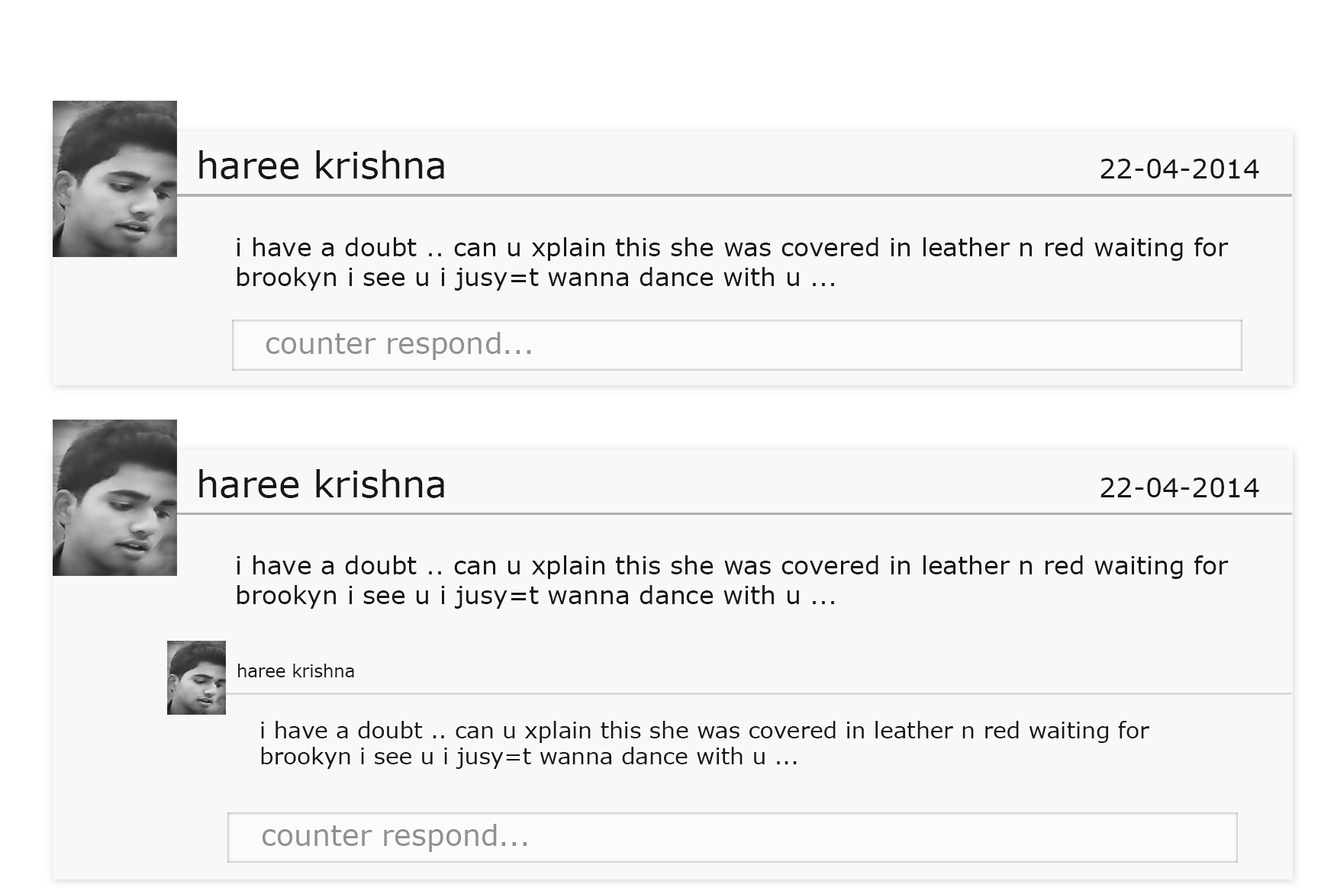
<style>
.page{position:relative;width:1334px;height:894px;background:#f8f8f8}
.page>*{position:absolute;margin:0}
.t1{font:36.5px "Verdana";color:#171717}
.t2{font:27px "Verdana";color:#171717}
.t3{font:24.6px "Verdana";color:#171717}
.t4{font:29.4px "Verdana";color:#909090}
.t5{font:17.3px "Verdana";color:#171717}
.t6{font:21.9px "Verdana";color:#171717}
</style>
<div class="page">
<p class="t1" style="left:199px;top:150px;width:245px;height:29px">haree krishna</p>
<p class="t2" style="left:1100px;top:159px;width:159px;height:20px">22-04-2014</p>
<p class="t3" style="left:237px;top:237px;width:991px;height:54px">i have a doubt .. can u xplain this she was covered in leather n red waiting for <br>brookyn i see u i jusy=t wanna dance with u ...</p>
<p class="t4" style="left:265px;top:332px;width:266px;height:28px">counter respond...</p>
<p class="t1" style="left:199px;top:469px;width:245px;height:29px">haree krishna</p>
<p class="t2" style="left:1100px;top:478px;width:159px;height:19px">22-04-2014</p>
<p class="t3" style="left:237px;top:555px;width:991px;height:54px">i have a doubt .. can u xplain this she was covered in leather n red waiting for <br>brookyn i see u i jusy=t wanna dance with u ...</p>
<p class="t5" style="left:238px;top:664px;width:116px;height:13px">haree krishna</p>
<p class="t6" style="left:261px;top:721px;width:888px;height:48px">i have a doubt .. can u xplain this she was covered in leather n red waiting for <br>brookyn i see u i jusy=t wanna dance with u ...</p>
<p class="t4" style="left:262px;top:824px;width:265px;height:28px">counter respond...</p>
</div>
